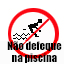
<style>
.page{position:relative;width:64px;height:64px;background:#ffffff}
.page>*{position:absolute;margin:0}
.t1{font:10.7px/12px "Impact";color:#000000}
</style>
<div class="page">
<p class="t1" style="left:7px;top:41px;width:55px;height:22px;text-align:center">Não defeque<br>na piscina</p>
</div>
